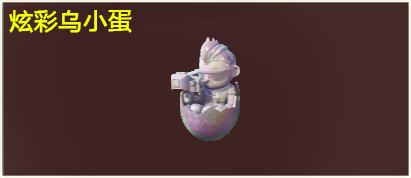
<style>
.page{position:relative;width:411px;height:178px}
.page>*{position:absolute;margin:0}
.t1{font:24px "MicrosoftYaHeiUI";color:#f4ff00;font-weight:bold}
</style>
<div class="page">
<p class="t1" style="left:9px;top:10px;width:123px;height:23px">炫彩乌小蛋</p>
</div>
